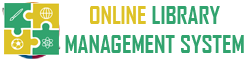
<style>
.page{position:relative;width:250px;height:60px;background:#ffffff}
.page>*{position:absolute;margin:0}
.t1{font:24px "AgencyFB-Bold";color:#31a36e}
.t2{font:24px "AgencyFB-Bold";color:#ddc227}
</style>
<div class="page">
<p class="t1" style="left:65px;top:6px;width:179px;height:47px;text-align:center"><span class="t2">ONLINE </span>LIBRARY <br>MANAGEMENT SYSTEM</p>
</div>
